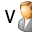
<style>
.page{position:relative;width:32px;height:32px;background:#ffffff}
.page>*{position:absolute;margin:0}
.t1{font:18px "MyriadPro-Regular";color:#000000}
</style>
<div class="page">
<p class="t1" style="left:5px;top:10px;width:11px;height:13px">V</p>
</div>
